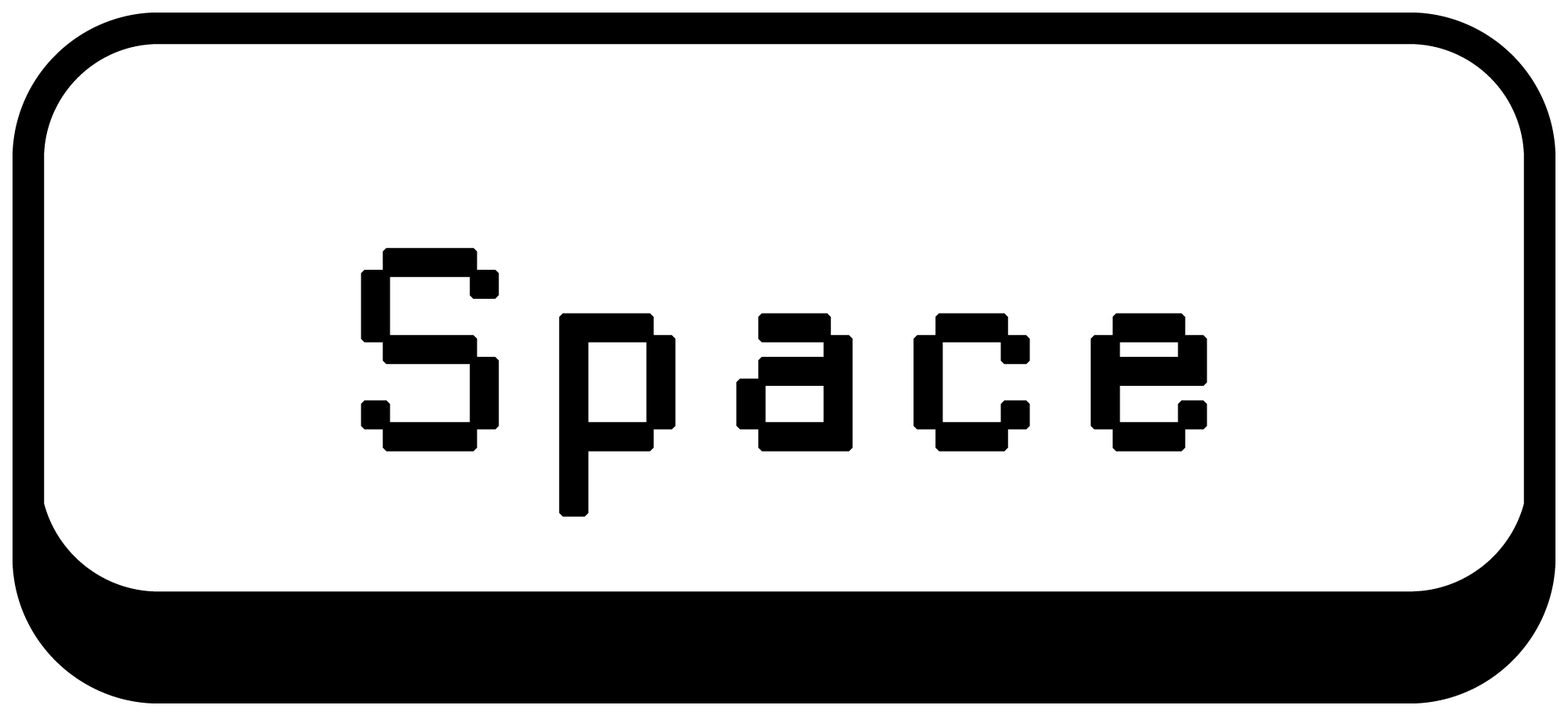
<style>
.page{position:relative;width:1568px;height:716px;background:#ffffff}
.page>*{position:absolute;margin:0}
.t1{font:261.3px "Cubic_11";letter-spacing:0.15em;color:#000000;font-weight:bold}
</style>
<div class="page">
<p class="t1" style="left:361px;top:248px;width:846px;height:269px">Space</p>
</div>
